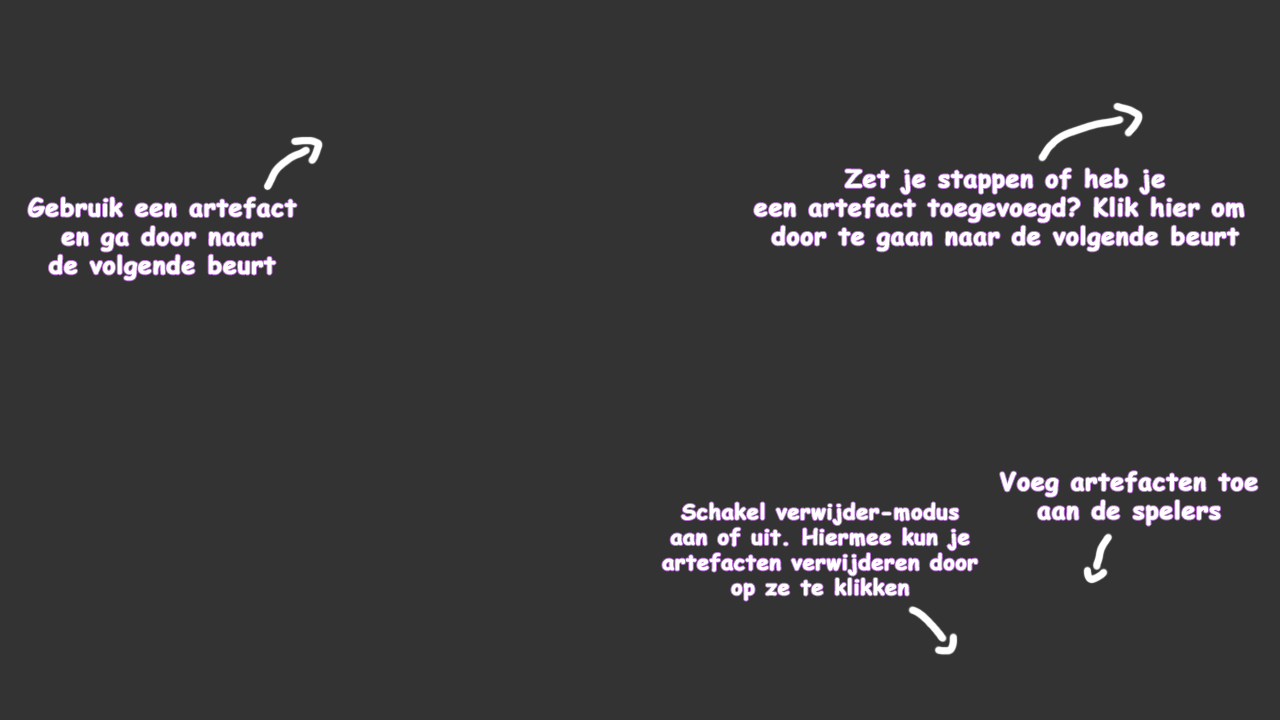
<style>
.page{position:relative;width:1280px;height:720px;background:#333333}
.page>*{position:absolute;margin:0}
.t1{font:24px "ComicSansMS-Bold";letter-spacing:0.02em;color:#ffffff;font-weight:bold}
.t2{font:21px "ComicSansMS-Bold";letter-spacing:0.02em;color:#ffffff;font-weight:bold}
</style>
<div class="page">
<p class="t1" style="left:754px;top:168px;width:490px;height:84px;text-align:center">Zet je stappen of heb je<br>een artefact toegevoegd? Klik hier om <br>door te gaan naar de volgende beurt</p>
<p class="t1" style="left:28px;top:197px;width:269px;height:84px;text-align:center">Gebruik een artefact<br>en ga door naar<br>de volgende beurt</p>
<p class="t1" style="left:1000px;top:471px;width:258px;height:55px;text-align:center">Voeg artefacten toe<br>aan de spelers</p>
<p class="t2" style="left:662px;top:502px;width:316px;height:99px;text-align:center">Schakel verwijder-modus<br>aan of uit. Hiermee kun je<br>artefacten verwijderen door<br>op ze te klikken</p>
</div>
